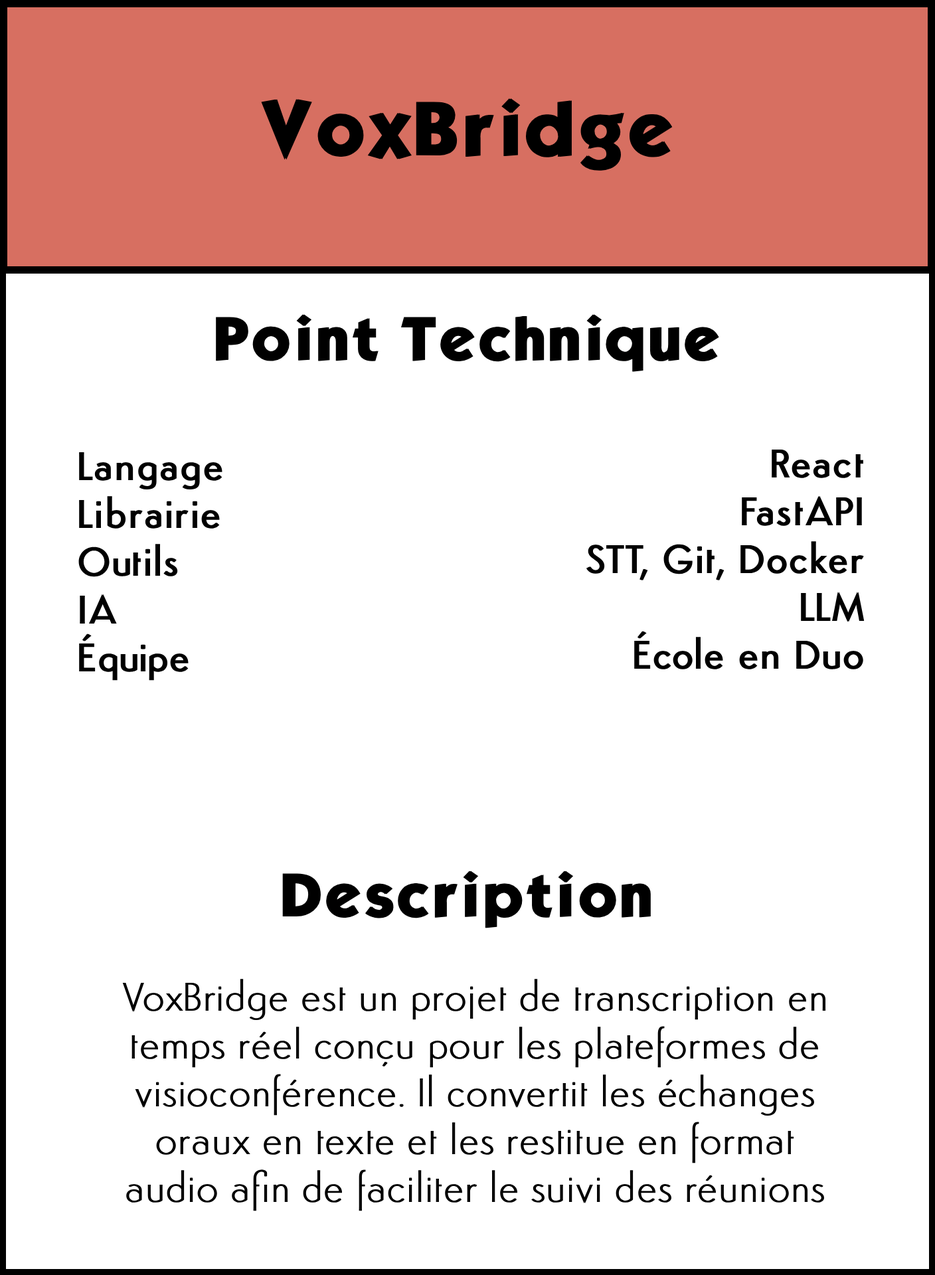
<style>
.page{position:relative;width:935px;height:1275px;background:#ffffff}
.page>*{position:absolute;margin:0}
.t1{font:66.4px "KabelBdNormal";color:#000000;font-weight:bold}
.t2{font:53.1px "KabelBdNormal";color:#000000;font-weight:bold}
.t3{font:39.8px "Semplicita-Medium";color:#000000;font-weight:bold}
.t4{font:39.8px "Semplicita-Light";color:#000000;font-weight:bold}
</style>
<div class="page">
<p class="t1" style="left:261px;top:98px;width:412px;height:73px">VoxBridge</p>
<p class="t2" style="left:216px;top:314px;width:503px;height:58px">Point Technique</p>
<p class="t3" style="left:586px;top:450px;width:279px;height:219px;text-align:right">React<br>FastAPI<br>STT, Git, Docker <br>LLM<br>École en Duo</p>
<p class="t3" style="left:78px;top:452px;width:144px;height:229px">Langage<br>Librairie<br>Outils<br>IA<br>Équipe</p>
<p class="t2" style="left:282px;top:871px;width:369px;height:57px">Description</p>
<p class="t4" style="left:122px;top:979px;width:704px;height:232px;text-align:center">VoxBridge est un projet de transcription en temps réel conçu pour les plateformes de visioconférence. Il convertit les échanges oraux en texte et les restitue en format audio afin de faciliter le suivi des réunions</p>
</div>
